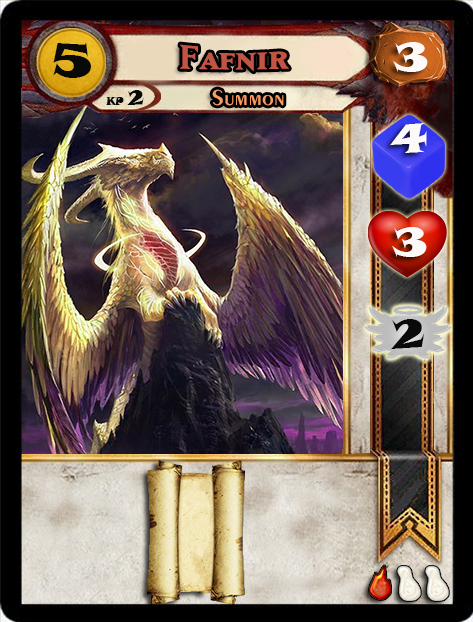
<style>
.page{position:relative;width:473px;height:622px}
.page>*{position:absolute;margin:0}
.t1{font:46.6px "SnapITC-Regular";color:#090909;scale:1.05 1}
.t2{font:40px "MatrixBoldSmallCaps";color:#c25443;scale:1.06 1}
.t3{font:40px "SnapITC-Regular";color:#fef9f9;scale:1.05 1}
.t4{font:22.7px "Exotic350BT-DemiBold";color:#f89c64;scale:1.06 1}
.t5{font:20.5px "SnapITC-Regular";color:#090909}
.t6{font:40px "SnapITC-Regular";color:#090909;scale:1.05 1}
</style>
<div class="page">
<p class="t1" style="left:53px;top:42px;width:38px;height:36px">5</p>
<p class="t2" style="left:180px;top:44px;width:109px;height:28px">Fafnir</p>
<p class="t3" style="left:393px;top:42px;width:35px;height:30px">3</p>
<p class="t4" style="left:212px;top:89px;width:72px;height:17px">Summon</p>
<p class="t5" style="left:127px;top:90px;width:17px;height:15px">2</p>
<p class="t3" style="left:390px;top:123px;width:37px;height:30px">4</p>
<p class="t3" style="left:392px;top:227px;width:35px;height:30px">3</p>
<p class="t6" style="left:391px;top:319px;width:34px;height:30px">2</p>
</div>
